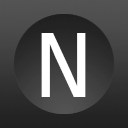
<style>
.page{position:relative;width:128px;height:128px}
.page>*{position:absolute;margin:0}
.t1{font:100px "Consolas";color:#ffffff}
</style>
<div class="page">
<p class="t1" style="left:41px;top:33px;width:45px;height:64px">N</p>
</div>
